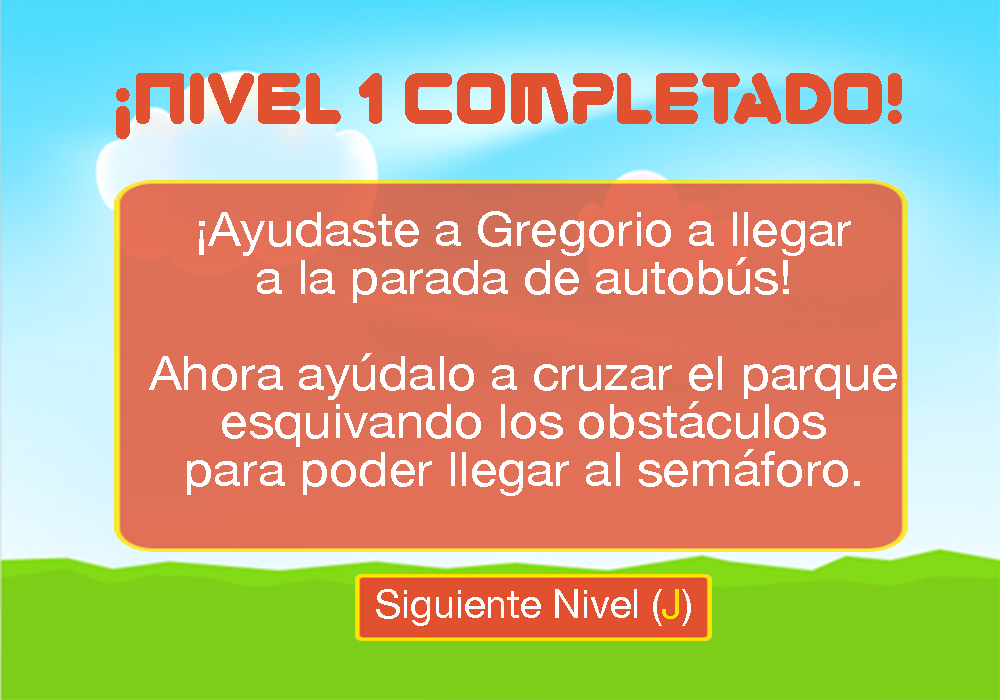
<style>
.page{position:relative;width:1000px;height:700px}
.page>*{position:absolute;margin:0}
.t1{font:72px "Zorque-Regular";color:#e15130}
.t2{font:48px/48px "HelveticaNeue";color:#ffffff;scale:1.06 1}
.t3{font:40px "HelveticaNeue";color:#ffffff}
.t4{font:40px "HelveticaNeue";color:#ffe100}
</style>
<div class="page">
<p class="t1" style="left:116px;top:73px;width:786px;height:66px">¡niVEL 1 COMPLETADO!</p>
<p class="t2" style="left:149px;top:211px;width:748px;height:285px;text-align:center">¡Ayudaste a Gregorio a llegar<br>a la parada de autobús!<br><br>Ahora ayúdalo a cruzar el parque<br>esquivando los obstáculos<br>para poder llegar al semáforo.</p>
<p class="t3" style="left:376px;top:589px;width:315px;height:37px">Siguiente Nivel (<span class="t4">J</span>)</p>
</div>
